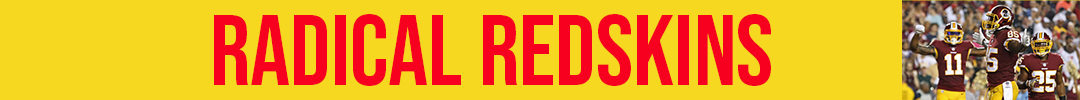
<style>
.page{position:relative;width:1080px;height:100px;background:#f5d81f}
.page>*{position:absolute;margin:0}
.t1{font:100px "BebasNeue-Regular";color:#f7001f}
</style>
<div class="page">
<p class="t1" style="left:214px;top:14px;width:557px;height:72px">Radical Redskins</p>
</div>
